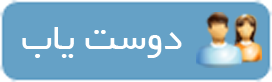
<style>
.page{position:relative;width:272px;height:82px;background:#65a1c6}
.page>*{position:absolute;margin:0}
.t1{font:40px "BYekan";color:#ffffff}
</style>
<div class="page">
<p class="t1" style="left:22px;top:27px;width:160px;height:31px">دوست یاب</p>
</div>
